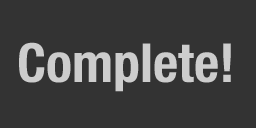
<style>
.page{position:relative;width:256px;height:128px;background:#333333}
.page>*{position:absolute;margin:0}
.t1{font:54px "HelveticaNeue-CondensedBold";color:#cdcdcd}
</style>
<div class="page">
<p class="t1" style="left:19px;top:42px;width:212px;height:50px">Complete!</p>
</div>
